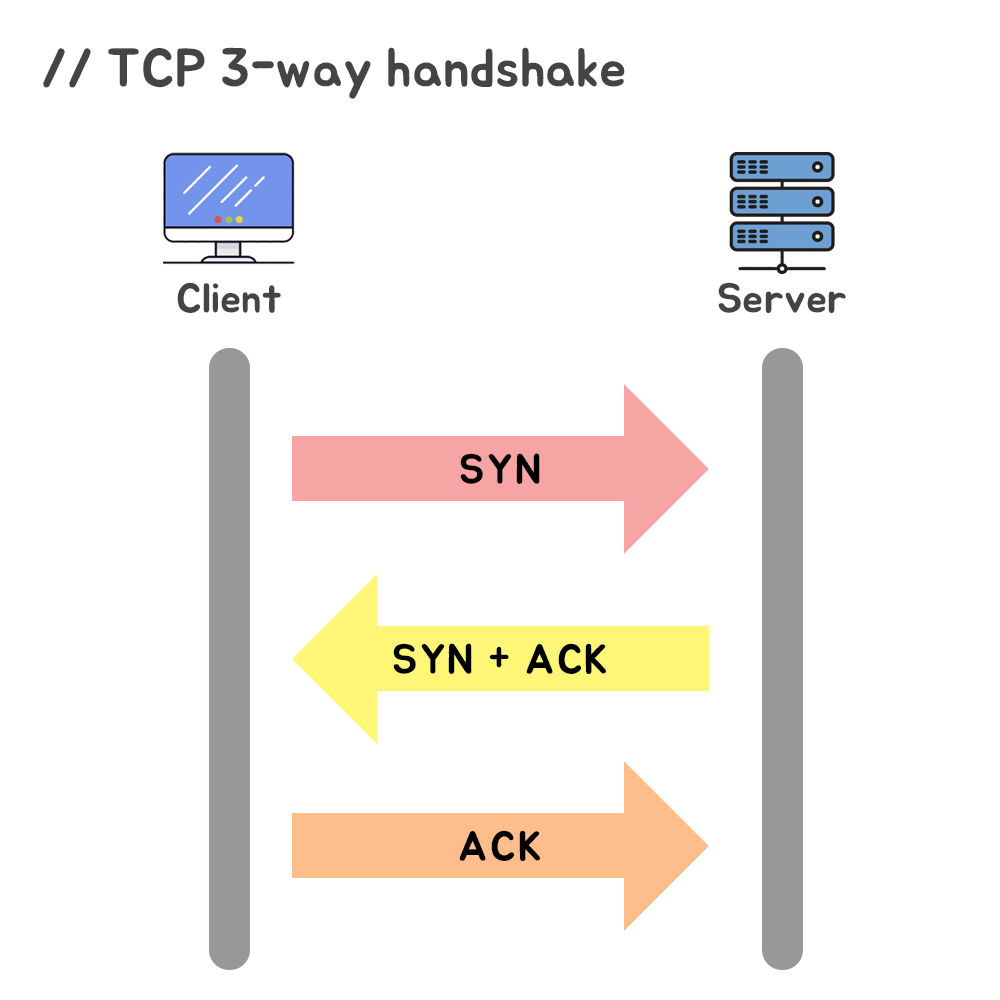
<style>
.page{position:relative;width:1000px;height:1000px;background:#ffffff}
.page>*{position:absolute;margin:0}
.t1{font:54.2px "BMJUA";color:#444444}
.t2{font:41.7px "BMJUA";color:#444444}
.t3{font:41.7px "BMJUA";letter-spacing:0.05em;color:#000000}
</style>
<div class="page">
<p class="t1" style="left:43px;top:47px;width:582px;height:52px">// TCP 3-way handshake</p>
<p class="t2" style="left:177px;top:282px;width:104px;height:31px">Client</p>
<p class="t2" style="left:718px;top:282px;width:128px;height:31px">Server</p>
<p class="t3" style="left:460px;top:453px;width:80px;height:31px">SYN</p>
<p class="t3" style="left:393px;top:643px;width:213px;height:31px">SYN + ACK</p>
<p class="t3" style="left:459px;top:830px;width:81px;height:31px">ACK</p>
</div>
